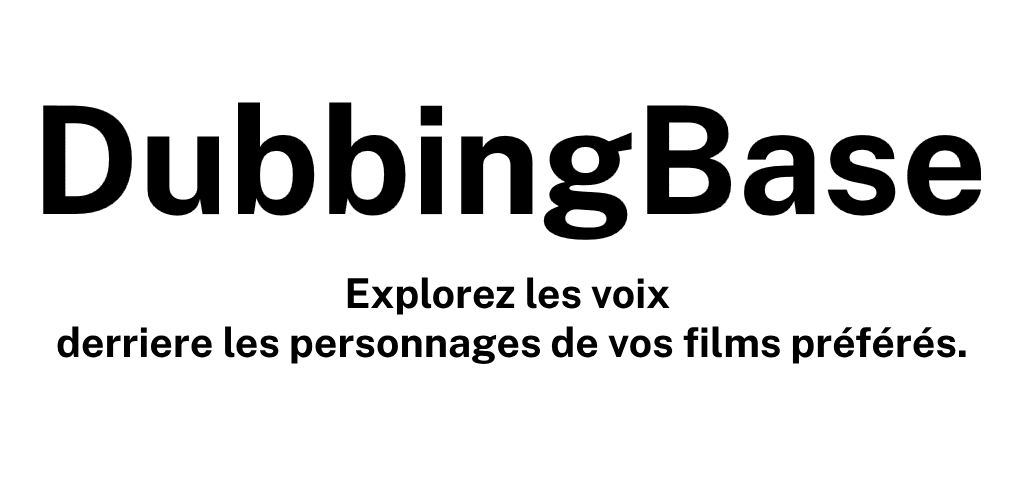
<style>
.page{position:relative;width:1024px;height:500px;background:#ffffff}
.page>*{position:absolute;margin:0}
.t1{font:150px "PublicSans-Bold";color:#000000}
.t2{font:41px "PublicSans-Bold";color:#000000}
</style>
<div class="page">
<p class="t1" style="left:43px;top:102px;width:938px;height:138px">DubbingBase</p>
<p class="t2" style="left:57px;top:277px;width:909px;height:88px;text-align:center">Explorez les voix <br>derriere les personnages de vos films préférés.</p>
</div>
